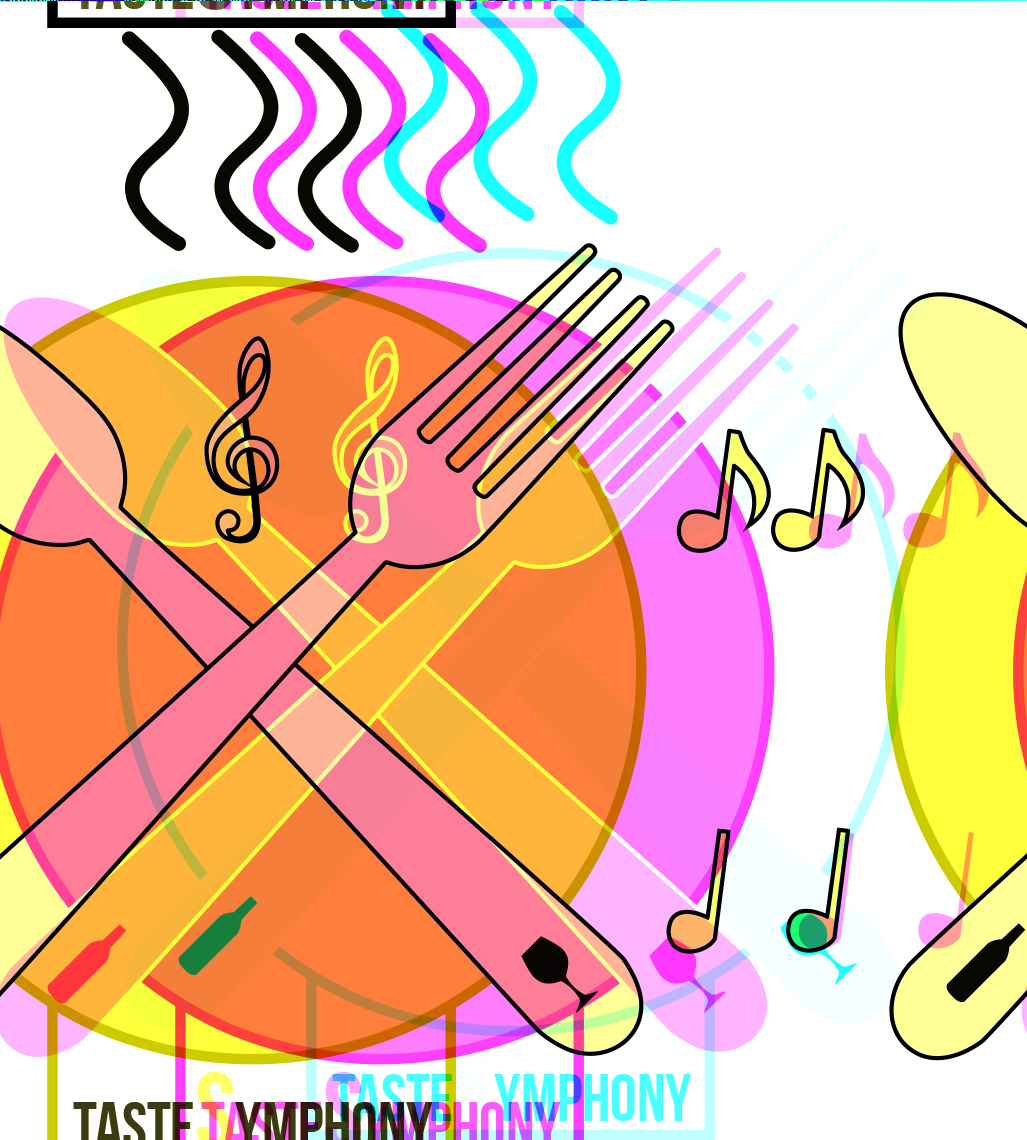
<style>
.page{position:relative;width:1027px;height:1140px;background:#ffffff}
.page>*{position:absolute;margin:0}
.t1{font:66.7px "BebasNeueBold"}
.t2{font:108.3px "BebasNeueBold"}
</style>
<div class="page">
<p class="t1" style="left:329px;top:1043px;width:360px;height:78px">Taste<span class="t2">s</span>ymphony</p>
</div>
